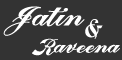
<style>
.page{position:relative;width:122px;height:60px;background:#333333}
.page>*{position:absolute;margin:0}
.t1{font:27px "FabulousPERSONALUSE";color:#ffffff}
.t2{font:25px "FabulousPERSONALUSE";color:#ffffff}
.t3{font:19px "FabulousPERSONALUSE";color:#ffffff}
</style>
<div class="page">
<p class="t1" style="left:3px;top:6px;width:82px;height:30px">Jatin</p>
<p class="t2" style="left:85px;top:19px;width:18px;height:20px">&amp;</p>
<p class="t3" style="left:32px;top:38px;width:88px;height:18px">Raveena</p>
</div>
